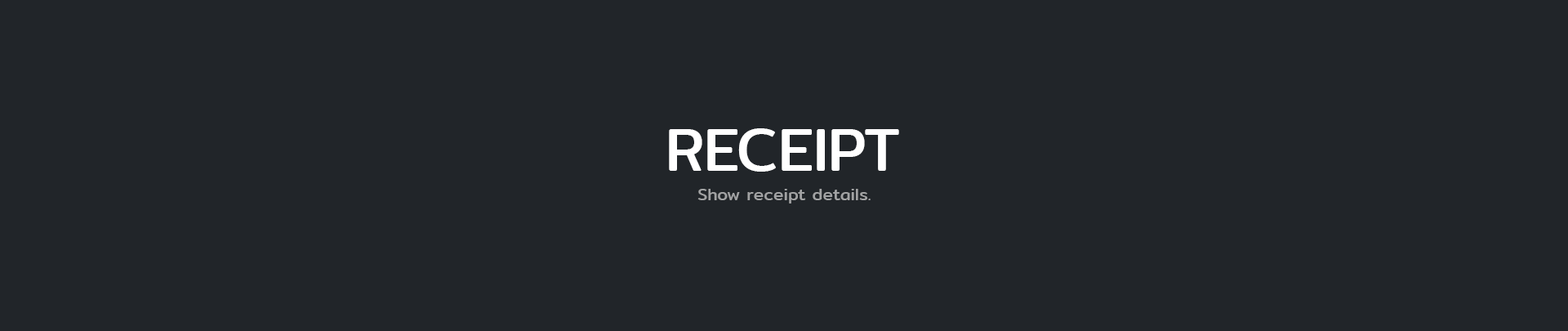
<style>
.page{position:relative;width:1568px;height:331px;background:#212529}
.page>*{position:absolute;margin:0}
.t1{font:61.2px "Mitr-Regular";color:#ffffff}
.t2{font:17px "Mitr-Regular";color:#a1a2a3}
</style>
<div class="page">
<p class="t1" style="left:669px;top:128px;width:230px;height:44px">RECEIPT</p>
<p class="t2" style="left:697px;top:189px;width:174px;height:14px">Show receipt details.</p>
</div>
